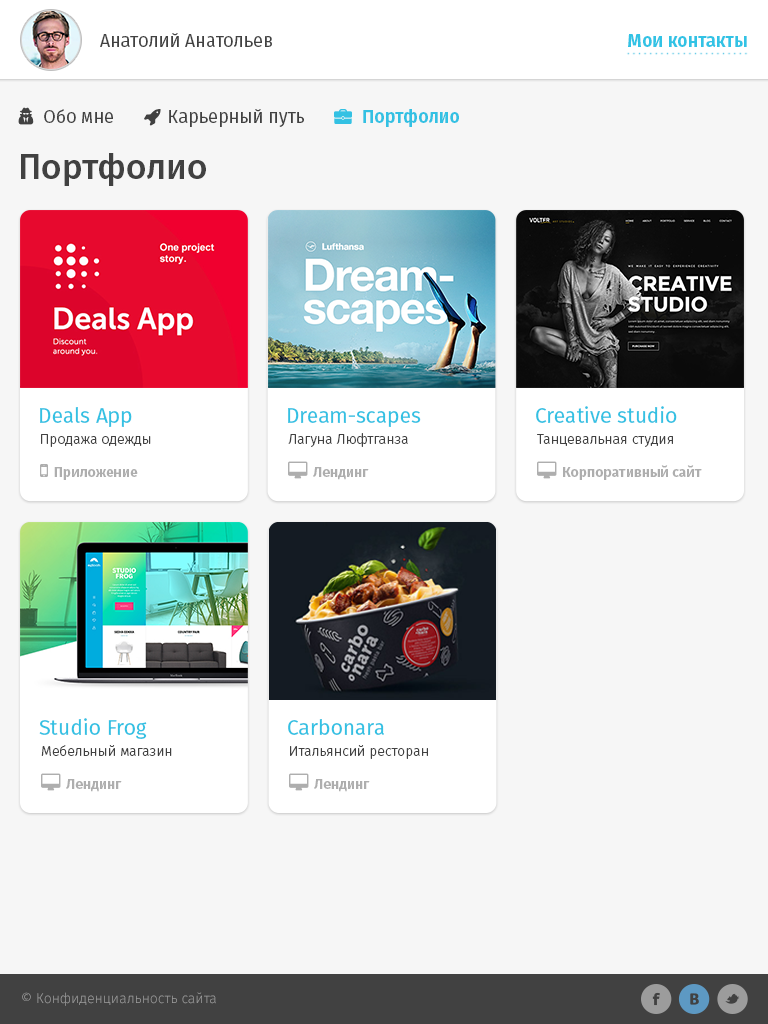
<style>
.page{position:relative;width:768px;height:1024px;background:#f6f6f6}
.page>*{position:absolute;margin:0}
.t1{font:18px "FiraSans-Regular";color:#414141}
.t2{font:18px "FiraSans-Bold";color:#32c3e5}
.t3{font:18px "FiraSans-Bold";color:#33c1e3}
.t4{font:35px "FiraSans-Medium";color:#414141}
.t5{font:21px "FiraSans-Regular";color:#33c1e3}
.t6{font:14px "FiraSans-Light";color:#414141}
.t7{font:14px "FiraSans-Light";color:#9c9c9c}
</style>
<div class="page">
<p class="t1" style="left:100px;top:33px;width:172px;height:14px">Анатолий Анатольев</p>
<p class="t2" style="left:628px;top:34px;width:119px;height:13px">Мои контакты</p>
<p class="t3" style="left:363px;top:109px;width:96px;height:18px">Портфолио</p>
<p class="t4" style="left:21px;top:153px;width:185px;height:33px">Портфолио</p>
<p class="t5" style="left:40px;top:407px;width:92px;height:20px">Deals App</p>
<p class="t5" style="left:288px;top:408px;width:133px;height:19px">Dream-scapes</p>
<p class="t5" style="left:536px;top:406px;width:141px;height:17px">Creative studio</p>
<p class="t6" style="left:41px;top:434px;width:110px;height:13px">Продажа одежды</p>
<p class="t6" style="left:288px;top:433px;width:120px;height:14px">Лагуна Люфтганза</p>
<p class="t6" style="left:537px;top:434px;width:136px;height:13px">Танцевальная студия</p>
<p class="t5" style="left:39px;top:718px;width:108px;height:21px">Studio Frog</p>
<p class="t5" style="left:288px;top:719px;width:96px;height:16px">Carbonara</p>
<p class="t6" style="left:41px;top:745px;width:131px;height:11px">Мебельный магазин</p>
<p class="t6" style="left:290px;top:745px;width:138px;height:14px">Итальянсий ресторан</p>
<p class="t7" style="left:22px;top:992px;width:194px;height:14px">© Конфиденциальность сайта</p>
</div>
